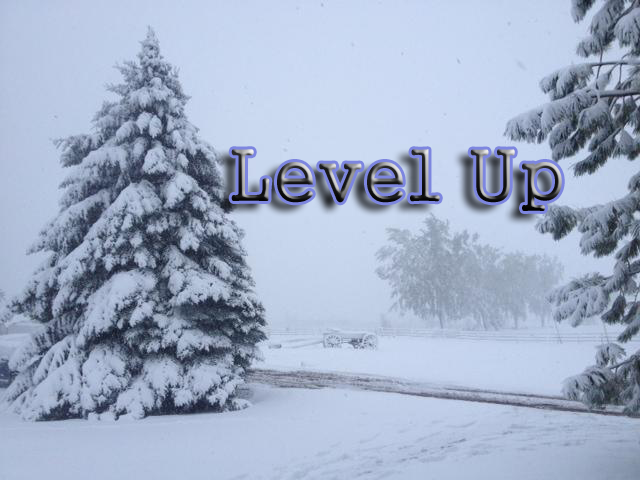
<style>
.page{position:relative;width:640px;height:480px}
.page>*{position:absolute;margin:0}
.t1{font:72px "Gungsuh"}
</style>
<div class="page">
<p class="t1" style="left:231px;top:149px;width:331px;height:62px">Level Up</p>
</div>
